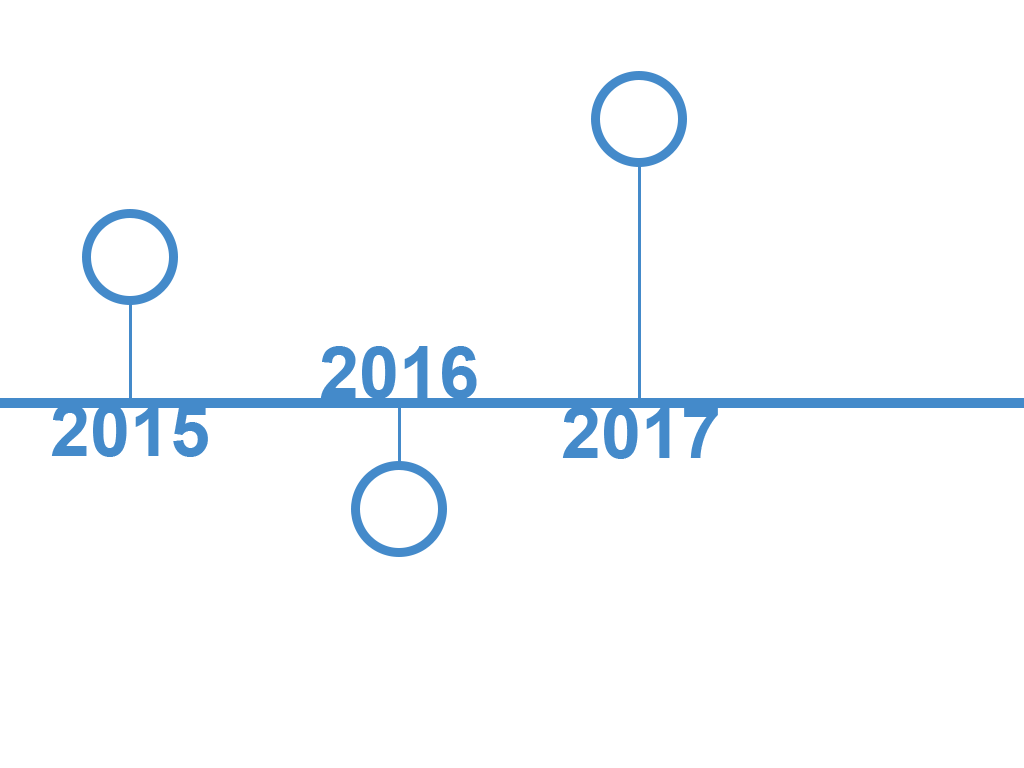
<style>
.page{position:relative;width:1024px;height:768px;background:#ffffff}
.page>*{position:absolute;margin:0}
.t1{font:72px "Arial-BoldMT";color:#448aca}
</style>
<div class="page">
<p class="t1" style="left:320px;top:346px;width:157px;height:53px">2016</p>
<p class="t1" style="left:51px;top:404px;width:157px;height:53px">2015</p>
<p class="t1" style="left:562px;top:406px;width:156px;height:53px">2017</p>
</div>
